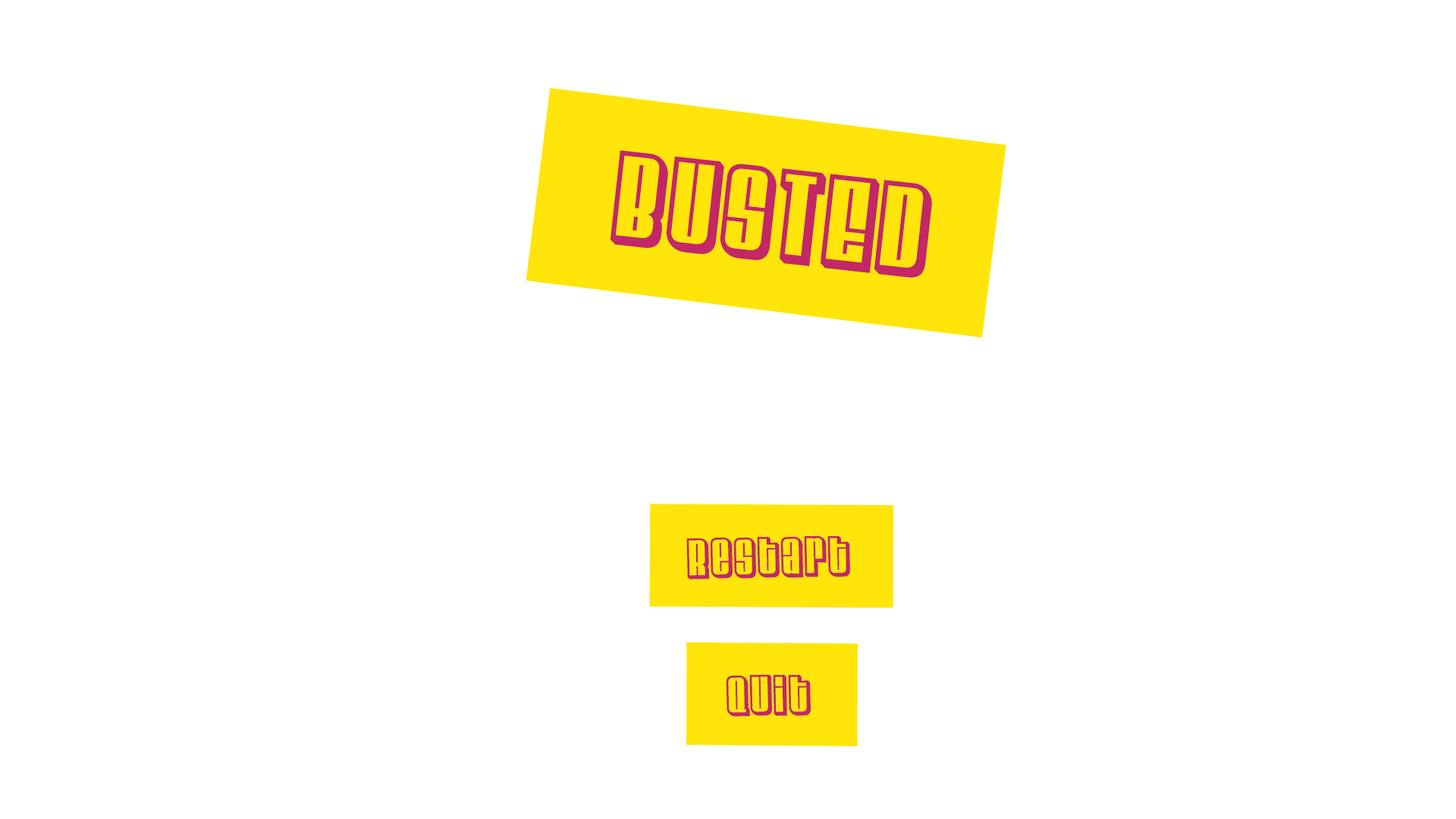
<style>
.page{position:relative;width:1456px;height:819px;background:#ffffff}
.page>*{position:absolute;margin:0}
.t1{font:120.8px "VelvendaChill-Regular";color:#c22865}
.t2{font:52.3px "VelvendaChill-Regular";color:#c22865}
</style>
<div class="page">
<p class="t1" style="left:610px;top:150px;width:322px;height:128px;rotate:6deg">BUSTED</p>
<p class="t2" style="left:686px;top:535px;width:164px;height:44px;rotate:-1deg">Restart</p>
<p class="t2" style="left:726px;top:674px;width:85px;height:43px;rotate:-1deg">Quit</p>
</div>
